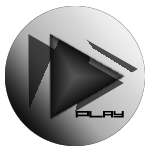
<style>
.page{position:relative;width:150px;height:150px;background:#ffffff}
.page>*{position:absolute;margin:0}
.t1{font:18px "Karelia";color:#000000;font-weight:bold}
</style>
<div class="page">
<p class="t1" style="left:75px;top:111px;width:49px;height:7px">Play</p>
</div>
